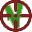
<style>
.page{position:relative;width:32px;height:32px;background:#ffffff}
.page>*{position:absolute;margin:0}
.t1{font:46.5px "adrippingmarker";letter-spacing:0.1em}
</style>
<div class="page">
<p class="t1" style="left:5px;top:2px;width:17px;height:31px">v</p>
</div>
